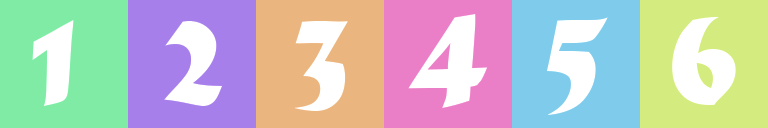
<style>
.page{position:relative;width:768px;height:128px}
.page>*{position:absolute;margin:0}
.t1{font:136.6px "MaturaMTScriptCapitals";color:#ffffff}
</style>
<div class="page">
<p class="t1" style="left:408px;top:14px;width:80px;height:94px">4</p>
<p class="t1" style="left:546px;top:17px;width:62px;height:98px">5</p>
<p class="t1" style="left:672px;top:17px;width:64px;height:88px">6</p>
<p class="t1" style="left:32px;top:20px;width:42px;height:86px">1</p>
<p class="t1" style="left:164px;top:21px;width:59px;height:85px">2</p>
<p class="t1" style="left:294px;top:21px;width:54px;height:90px">3</p>
</div>
